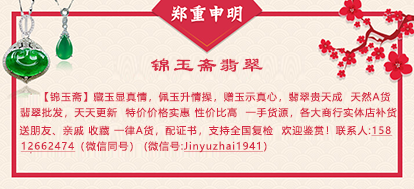
<style>
.page{position:relative;width:414px;height:189px}
.page>*{position:absolute;margin:0}
.t1{font:20.9px "LiSu";letter-spacing:0.1em;color:#d62c46}
.t2{font:9.9px "MicrosoftYaHei";letter-spacing:0.1em;color:#d62c46}
.t3{font:9.9px "MicrosoftYaHei";letter-spacing:0.1em;color:#d62c46;text-decoration:underline}
</style>
<div class="page">
<p class="t1" style="left:150px;top:58px;width:113px;height:14px">锦玉斋翡翠</p>
<p class="t2" style="left:44px;top:92px;width:347px;height:10px">【锦玉斋】藏玉显真情，佩玉升情操，赠玉示真心，翡翠贵天成  天然A货</p>
<p class="t2" style="left:20px;top:107px;width:377px;height:11px">翡翠批发，天天更新  特价价格实惠 性价比高  一手货源，各大商行实体店补货</p>
<p class="t2" style="left:19px;top:125px;width:374px;height:11px">送朋友、亲戚 收藏 一律A货，配证书，支持全国复检  欢迎鉴赏！联系人:<span class="t3">158</span></p>
<p class="t3" style="left:20px;top:141px;width:247px;height:12px">12662474<span class="t2">（微信同号） (微信号:</span>Jinyuzhai1941<span class="t2">）</span></p>
</div>
